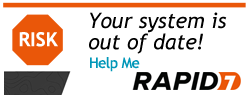
<style>
.page{position:relative;width:250px;height:98px;background:#ffffff}
.page>*{position:absolute;margin:0}
.t1{font:21.3px/21.3px "TrebuchetMS-Italic";color:#000000}
.t2{font:19.4px "TrebuchetMS-Bold";color:#ffffff}
.t3{font:14.7px "TrebuchetMS";letter-spacing:-0.025em;color:#0197b8}
</style>
<div class="page">
<p class="t1" style="left:89px;top:12px;width:138px;height:42px">Your system is<br>out of date!</p>
<p class="t2" style="left:19px;top:32px;width:39px;height:15px">RISK</p>
<p class="t3" style="left:90px;top:57px;width:50px;height:15px">Help Me</p>
</div>
